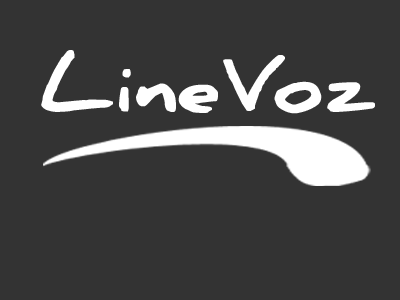
<style>
.page{position:relative;width:400px;height:300px;background:#333333}
.page>*{position:absolute;margin:0}
.t1{font:72.5px "DanielBold";color:#ffffff;font-weight:bold;scale:1.08 1}
</style>
<div class="page">
<p class="t1" style="left:41px;top:50px;width:334px;height:64px">LineVoz</p>
</div>
